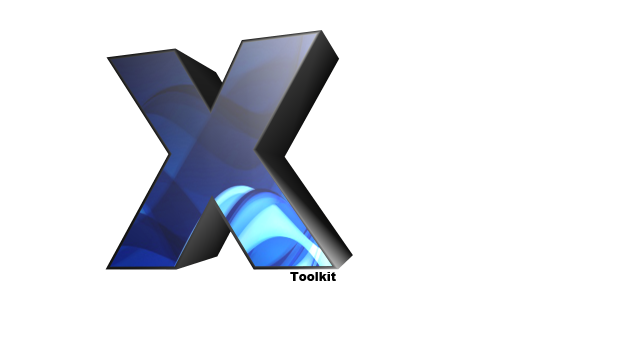
<style>
.page{position:relative;width:640px;height:360px;background:#ffffff}
.page>*{position:absolute;margin:0}
.t1{font:12px "Arial-Black";color:#000000}
</style>
<div class="page">
<p class="t1" style="left:290px;top:272px;width:46px;height:9px">Toolkit</p>
</div>
